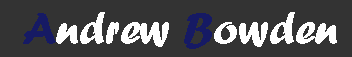
<style>
.page{position:relative;width:352px;height:57px;background:#333333}
.page>*{position:absolute;margin:0}
.t1{font:45.8px "ForteMT";color:#ffffff}
.t2{font:45.8px "ForteMT";color:#161a64}
</style>
<div class="page">
<p class="t1" style="left:23px;top:12px;width:314px;height:37px"><span class="t2">A</span>ndrew <span class="t2">B</span>owden</p>
</div>
